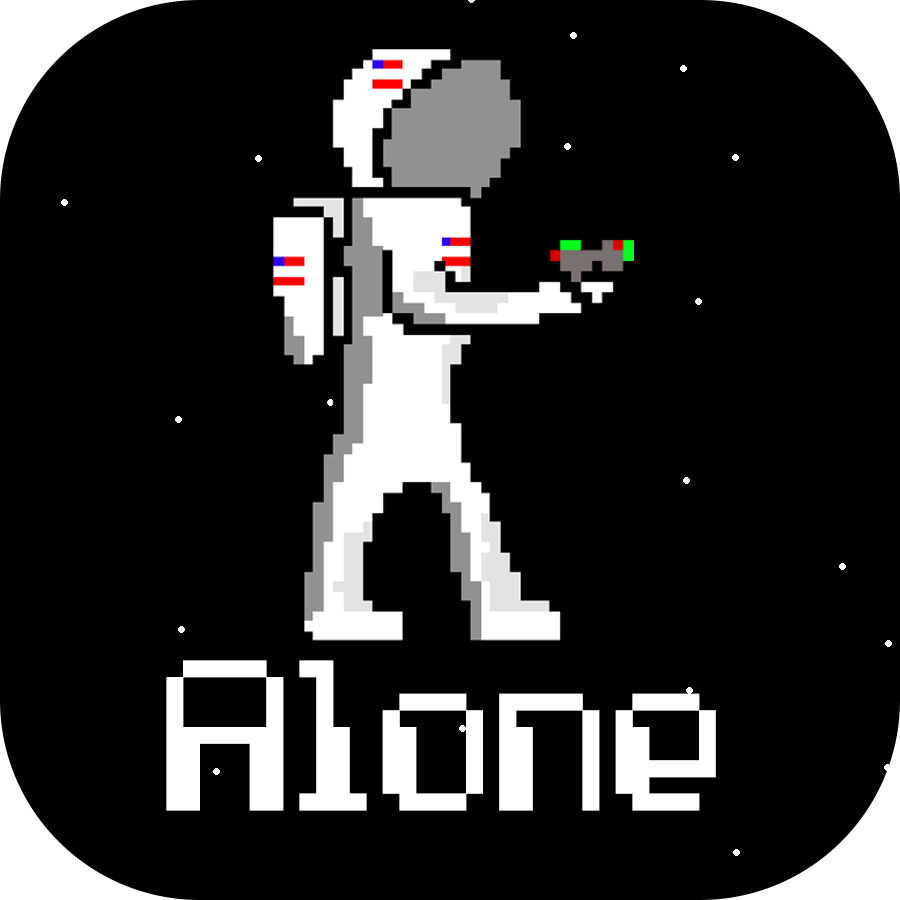
<style>
.page{position:relative;width:900px;height:900px;background:#000000}
.page>*{position:absolute;margin:0}
.t1{font:332.8px "ComputerPixel-7";color:#ffffff}
</style>
<div class="page">
<p class="t1" style="left:166px;top:660px;width:550px;height:151px">Alone</p>
</div>
